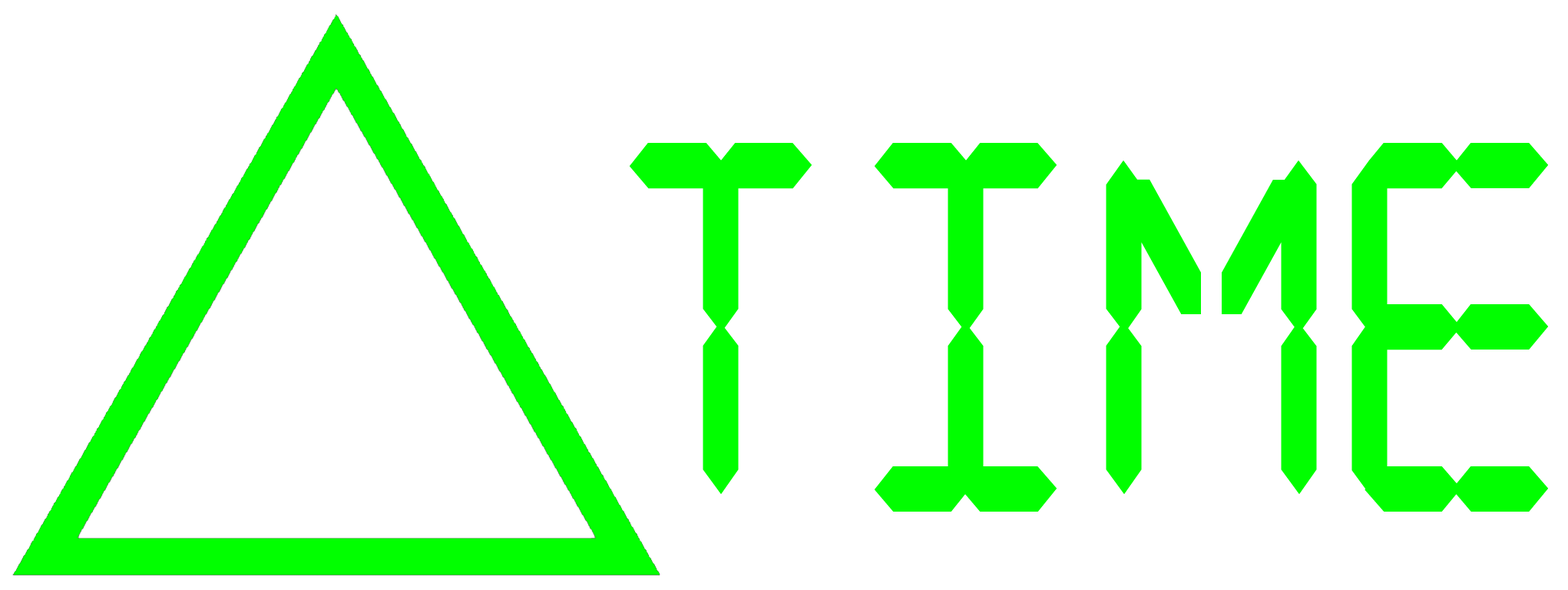
<style>
.page{position:relative;width:1568px;height:590px;background:#ffffff}
.page>*{position:absolute;margin:0}
.t1{font:383.9px "DigitaldreamFatNarrow";color:#01fe00}
</style>
<div class="page">
<p class="t1" style="left:630px;top:143px;width:918px;height:368px">Time</p>
</div>
